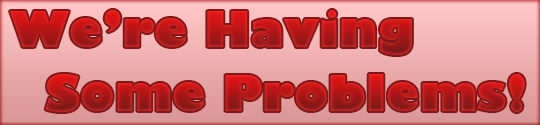
<style>
.page{position:relative;width:540px;height:125px}
.page>*{position:absolute;margin:0}
.t1{font:48px "GillSans-UltraBold"}
</style>
<div class="page">
<p class="t1" style="left:10px;top:10px;width:402px;height:45px">We’re Having</p>
<p class="t1" style="left:45px;top:74px;width:480px;height:38px">Some Problems!</p>
</div>
